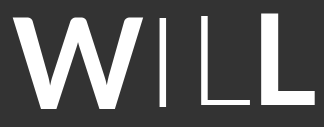
<style>
.page{position:relative;width:324px;height:127px;background:#333333}
.page>*{position:absolute;margin:0}
.t1{font:126px "Lato-Bold";color:#ffffff}
.t2{font:126px "Lato-Light";color:#ffffff}
</style>
<div class="page">
<p class="t1" style="left:12px;top:17px;width:132px;height:92px">W</p>
<p class="t2" style="left:201px;top:16px;width:49px;height:89px">L</p>
<p class="t1" style="left:261px;top:13px;width:54px;height:92px">L</p>
<p class="t2" style="left:159px;top:18px;width:8px;height:89px">I</p>
</div>
